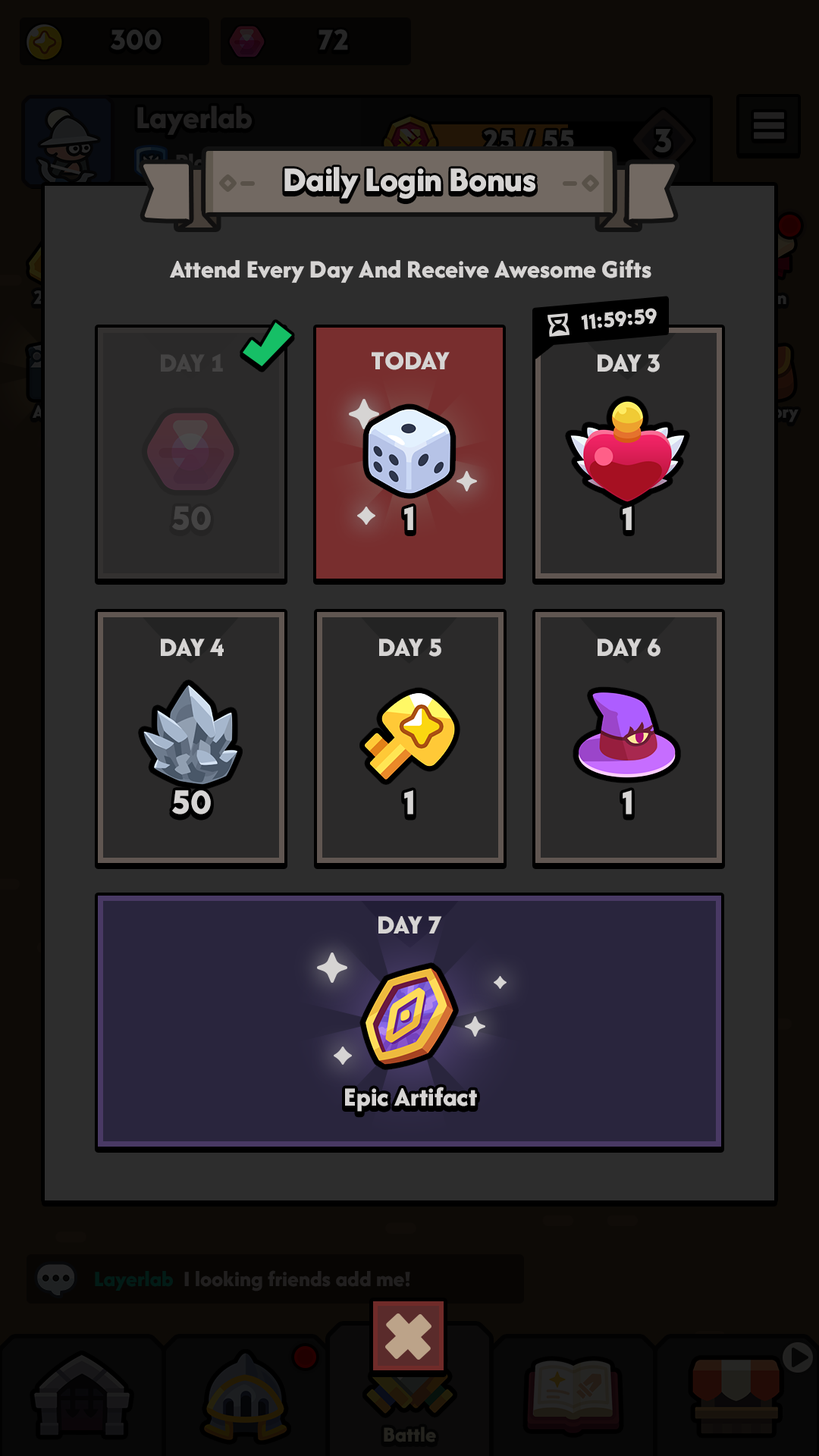
<style>
.page{position:relative;width:819px;height:1456px}
.page>*{position:absolute;margin:0}
.t1{font:36px "AfacadFlux-ExtraBold";letter-spacing:-0.01em;color:#d6d4d3}
.t2{font:26.2px "AfacadFlux-ExtraBold";color:#d6d4d3}
.t3{font:21.8px "LTAvocado-Bold";letter-spacing:-0.01em;color:#d6d4d3}
.t4{font:27.3px "AfacadFlux-ExtraBold";color:#444343;text-transform:uppercase}
.t5{font:27.3px "AfacadFlux-ExtraBold";color:#d6d4d3;text-transform:uppercase}
.t6{font:34.9px "LTAvocado-Bold";color:#444343}
.t7{font:34.9px "LTAvocado-Bold";color:#d6d4d3}
.t8{font:27.3px "AfacadFlux-ExtraBold";color:#d6d4d3}
</style>
<div class="page">
<p class="t1" style="left:284px;top:167px;width:252px;height:32px">Daily Login Bonus</p>
<p class="t2" style="left:170px;top:259px;width:481px;height:24px">Attend Every Day And Receive Awesome Gifts</p>
<p class="t3" style="left:581px;top:308px;width:76px;height:22px;rotate:-5deg">11:59:59</p>
<p class="t4" style="left:161px;top:353px;width:62px;height:19px">Day 1</p>
<p class="t5" style="left:372px;top:352px;width:78px;height:18px">Today</p>
<p class="t5" style="left:598px;top:354px;width:62px;height:18px">Day 3</p>
<p class="t6" style="left:172px;top:506px;width:39px;height:24px">50</p>
<p class="t7" style="left:404px;top:506px;width:9px;height:24px">1</p>
<p class="t7" style="left:623px;top:506px;width:9px;height:24px">1</p>
<p class="t5" style="left:161px;top:639px;width:63px;height:17px">Day 4</p>
<p class="t5" style="left:379px;top:639px;width:62px;height:18px">Day 5</p>
<p class="t5" style="left:598px;top:639px;width:62px;height:18px">Day 6</p>
<p class="t7" style="left:172px;top:790px;width:39px;height:24px">50</p>
<p class="t7" style="left:404px;top:790px;width:9px;height:24px">1</p>
<p class="t7" style="left:623px;top:790px;width:9px;height:24px">1</p>
<p class="t5" style="left:378px;top:916px;width:64px;height:17px">Day 7</p>
<p class="t8" style="left:345px;top:1087px;width:132px;height:25px">Epic Artifact</p>
</div>
